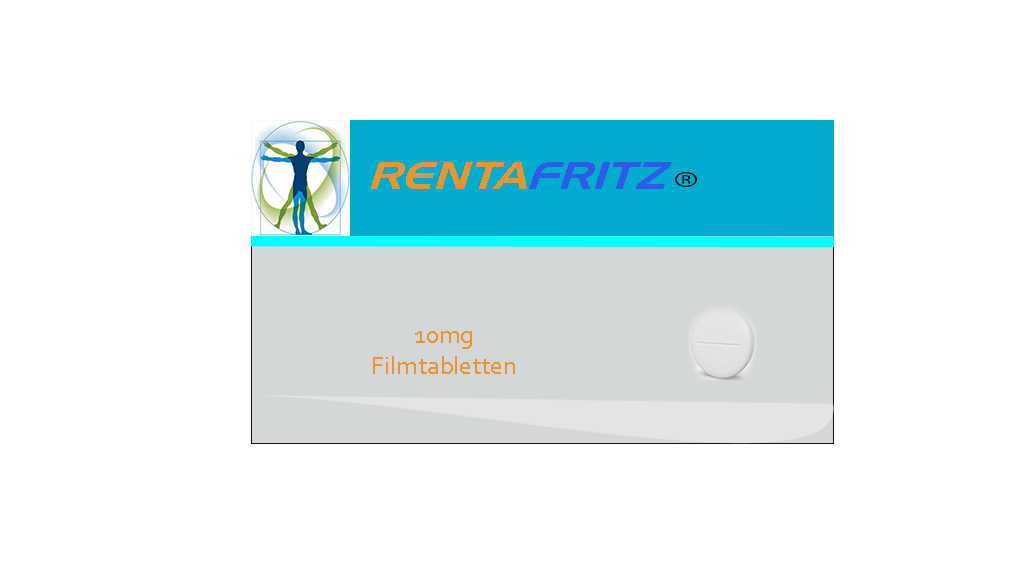
<style>
.page{position:relative;width:1024px;height:576px;background:#ffffff}
.page>*{position:absolute;margin:0}
.t1{font:37.5px "TamworthGothic";color:#e8942f;text-transform:uppercase;scale:1.21 1}
.t2{font:37.5px "TamworthGothic";color:#2f5be8;text-transform:uppercase;scale:1.21 1}
.t3{font:26px "Corbel";color:#e8942f}
</style>
<div class="page">
<p class="t1" style="left:371px;top:162px;width:301px;height:27px">Renta<span class="t2">fritz</span></p>
<p class="t3" style="left:373px;top:331px;width:142px;height:43px;text-align:center">10mg <br>Filmtabletten</p>
</div>
